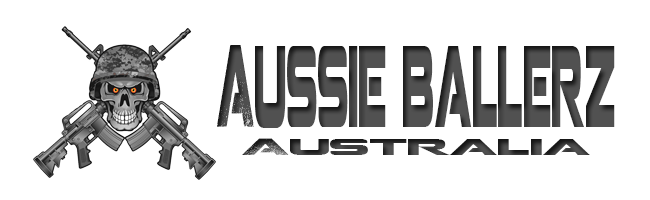
<style>
.page{position:relative;width:650px;height:200px;background:#ffffff}
.page>*{position:absolute;margin:0}
.t1{font:114.8px "Coalition";color:#484848;scale:0.3 1}
.t2{font:23px "Coalition";color:#484848;scale:1.9 1}
</style>
<div class="page">
<p class="t1" style="left:217px;top:45px;width:398px;height:110px;text-align:center">Aussie ballerz<br><span class="t2">Australia</span></p>
</div>
